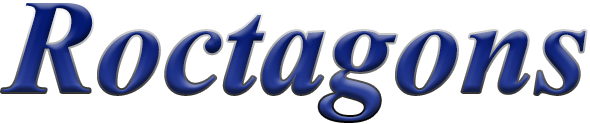
<style>
.page{position:relative;width:590px;height:124px;background:#ffffff}
.page>*{position:absolute;margin:0}
.t1{font:166.7px "Aparajita-BoldItalic"}
</style>
<div class="page">
<p class="t1" style="left:2px;top:3px;width:584px;height:118px">Roctagons</p>
</div>
